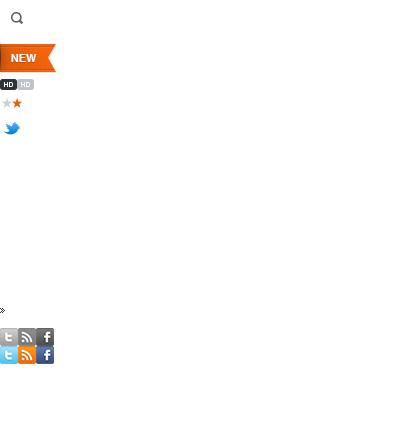
<style>
.page{position:relative;width:400px;height:422px;background:#ffffff}
.page>*{position:absolute;margin:0}
.t1{font:12px "ArialMT";color:#c2510c;text-transform:uppercase}
.t2{font:11px "Helvetica-Bold";color:#ffffff;text-transform:uppercase}
</style>
<div class="page">
<p class="t1" style="left:0px;top:46px;width:54px;height:1px;rotate:180deg">--------------</p>
<p class="t2" style="left:11px;top:54px;width:26px;height:8px">NEW</p>
<p class="t1" style="left:0px;top:69px;width:54px;height:1px;rotate:180deg">--------------</p>
</div>
